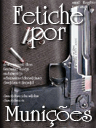
<style>
.page{position:relative;width:96px;height:128px}
.page>*{position:absolute;margin:0}
.t1{font:26.7px/16.2px "Occidental";color:#ffffff}
.t2{font:22.7px "Occidental";color:#ffffff;scale:1.13 1}
</style>
<div class="page">
<p class="t1" style="left:12px;top:3px;width:71px;height:45px;text-align:center">Fetiche<br>por</p>
<p class="t2" style="left:5px;top:106px;width:87px;height:21px">Munições</p>
</div>
